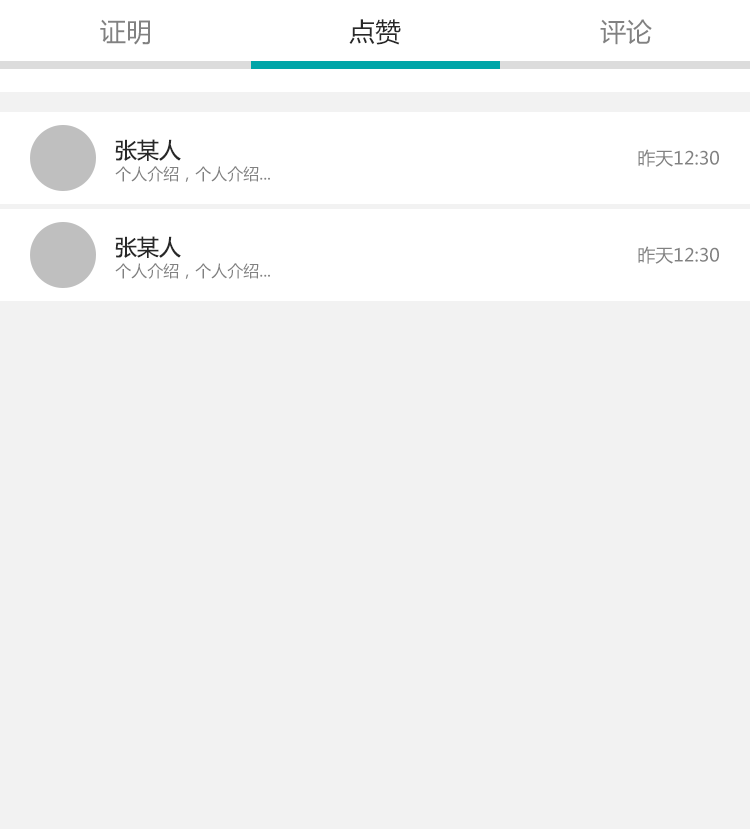
<style>
.page{position:relative;width:750px;height:829px;background:#f2f2f2}
.page>*{position:absolute;margin:0}
.t1{font:26px "MicrosoftYaHei";color:#818181}
.t2{font:26px "MicrosoftYaHei";color:#282828}
.t3{font:22px "MicrosoftYaHei";color:#282828}
.t4{font:18px "MicrosoftYaHei";color:#818181}
.t5{font:16px "MicrosoftYaHei";color:#818181}
</style>
<div class="page">
<p class="t1" style="left:100px;top:19px;width:50px;height:26px">证明</p>
<p class="t2" style="left:349px;top:19px;width:52px;height:26px">点赞</p>
<p class="t1" style="left:600px;top:19px;width:52px;height:26px">评论</p>
<p class="t3" style="left:115px;top:139px;width:66px;height:22px">张某人</p>
<p class="t4" style="left:638px;top:149px;width:81px;height:18px">昨天12:30</p>
<p class="t5" style="left:115px;top:166px;width:155px;height:16px">个人介绍，个人介绍...</p>
<p class="t3" style="left:115px;top:236px;width:66px;height:22px">张某人</p>
<p class="t4" style="left:638px;top:246px;width:81px;height:18px">昨天12:30</p>
<p class="t5" style="left:115px;top:263px;width:155px;height:16px">个人介绍，个人介绍...</p>
</div>
